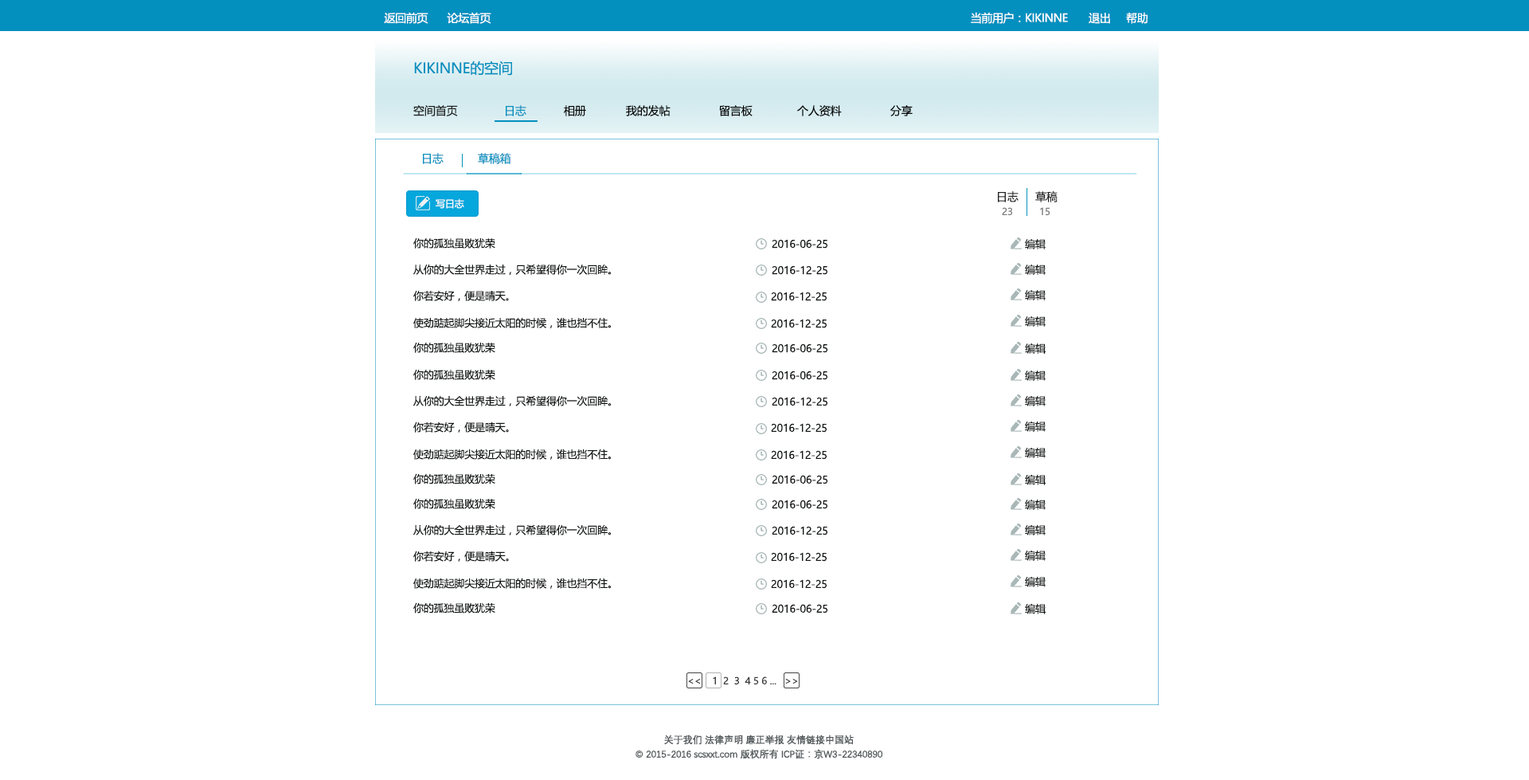
<style>
.page{position:relative;width:1529px;height:780px;background:#ffffff}
.page>*{position:absolute;margin:0}
.t1{font:11.2px "MicrosoftYaHei";letter-spacing:-0.025em;color:#ffffff}
.t2{font:14.3px "MicrosoftYaHei";letter-spacing:-0.01em;color:#0390bf}
.t3{font:11.2px "MicrosoftYaHei";letter-spacing:-0.01em;color:#1f2020}
.t4{font:11.2px "MicrosoftYaHei";letter-spacing:-0.01em;color:#0390bf}
.t5{font:11.2px "MicrosoftYaHei";letter-spacing:-0.01em;color:#040404}
.t6{font:11.2px "MicrosoftYaHei";letter-spacing:-0.01em;color:#242323}
.t7{font:9.6px "MicrosoftYaHei";letter-spacing:-0.01em;color:#ffffff}
.t8{font:9.6px "MicrosoftYaHei";letter-spacing:-0.01em;color:#7b7b7b}
.t9{font:10.4px "MicrosoftYaHei";letter-spacing:-0.01em;color:#131616}
.t10{font:9.6px "MicrosoftYaHei";letter-spacing:-0.01em;color:#38393a}
.t11{font:9.6px "MicrosoftYaHei";letter-spacing:-0.01em;color:#252626}
.t12{font:9.6px/14.3px "DengXian-Regular";letter-spacing:-0.025em;color:#545a5c;font-weight:bold}
</style>
<div class="page">
<p class="t1" style="left:384px;top:12px;width:45px;height:12px">返回前页</p>
<p class="t1" style="left:447px;top:12px;width:44px;height:12px">论坛首页</p>
<p class="t1" style="left:971px;top:12px;width:97px;height:12px">当前用户：KIKINNE</p>
<p class="t1" style="left:1089px;top:13px;width:21px;height:11px">退出</p>
<p class="t1" style="left:1126px;top:12px;width:22px;height:12px">帮助</p>
<p class="t2" style="left:414px;top:61px;width:98px;height:15px">KIKINNE的空间</p>
<p class="t3" style="left:413px;top:105px;width:45px;height:11px">空间首页</p>
<p class="t4" style="left:506px;top:105px;width:20px;height:11px">日志</p>
<p class="t5" style="left:564px;top:105px;width:22px;height:11px">相册</p>
<p class="t5" style="left:626px;top:105px;width:45px;height:11px">我的发帖</p>
<p class="t5" style="left:719px;top:105px;width:34px;height:11px">留言板</p>
<p class="t5" style="left:797px;top:105px;width:45px;height:11px">个人资料</p>
<p class="t5" style="left:890px;top:105px;width:23px;height:11px">分享</p>
<p class="t4" style="left:423px;top:153px;width:21px;height:11px">日志</p>
<p class="t4" style="left:478px;top:153px;width:33px;height:11px">草稿箱</p>
<p class="t6" style="left:998px;top:191px;width:21px;height:11px">日志</p>
<p class="t6" style="left:1035px;top:191px;width:23px;height:11px">草稿</p>
<p class="t7" style="left:436px;top:198px;width:28px;height:11px">写日志</p>
<p class="t8" style="left:1002px;top:207px;width:11px;height:9px">23</p>
<p class="t8" style="left:1040px;top:207px;width:11px;height:9px">15</p>
<p class="t9" style="left:413px;top:238px;width:82px;height:11px">你的孤独虽败犹荣</p>
<p class="t9" style="left:772px;top:239px;width:56px;height:10px">2016-06-25</p>
<p class="t9" style="left:1025px;top:239px;width:21px;height:10px">编辑</p>
<p class="t9" style="left:413px;top:264px;width:199px;height:11px">从你的大全世界走过，只希望得你一次回眸。</p>
<p class="t9" style="left:772px;top:265px;width:56px;height:10px">2016-12-25</p>
<p class="t9" style="left:1025px;top:264px;width:21px;height:11px">编辑</p>
<p class="t9" style="left:413px;top:291px;width:96px;height:10px">你若安好，便是晴天。</p>
<p class="t9" style="left:771px;top:292px;width:57px;height:9px">2016-12-25</p>
<p class="t9" style="left:1025px;top:290px;width:21px;height:10px">编辑</p>
<p class="t9" style="left:413px;top:318px;width:199px;height:10px">使劲踮起脚尖接近太阳的时候，谁也挡不住。</p>
<p class="t9" style="left:1025px;top:316px;width:21px;height:11px">编辑</p>
<p class="t9" style="left:771px;top:319px;width:57px;height:9px">2016-12-25</p>
<p class="t9" style="left:413px;top:342px;width:82px;height:11px">你的孤独虽败犹荣</p>
<p class="t9" style="left:772px;top:343px;width:56px;height:10px">2016-06-25</p>
<p class="t9" style="left:1025px;top:343px;width:21px;height:11px">编辑</p>
<p class="t9" style="left:413px;top:370px;width:82px;height:10px">你的孤独虽败犹荣</p>
<p class="t9" style="left:772px;top:370px;width:56px;height:10px">2016-06-25</p>
<p class="t9" style="left:1025px;top:370px;width:21px;height:11px">编辑</p>
<p class="t9" style="left:413px;top:395px;width:199px;height:11px">从你的大全世界走过，只希望得你一次回眸。</p>
<p class="t9" style="left:772px;top:397px;width:56px;height:9px">2016-12-25</p>
<p class="t9" style="left:1025px;top:396px;width:21px;height:10px">编辑</p>
<p class="t9" style="left:413px;top:421px;width:96px;height:11px">你若安好，便是晴天。</p>
<p class="t9" style="left:771px;top:423px;width:57px;height:9px">2016-12-25</p>
<p class="t9" style="left:1025px;top:421px;width:21px;height:11px">编辑</p>
<p class="t9" style="left:413px;top:448px;width:199px;height:12px">使劲踮起脚尖接近太阳的时候，谁也挡不住。</p>
<p class="t9" style="left:1025px;top:447px;width:21px;height:11px">编辑</p>
<p class="t9" style="left:771px;top:450px;width:57px;height:10px">2016-12-25</p>
<p class="t9" style="left:413px;top:473px;width:82px;height:11px">你的孤独虽败犹荣</p>
<p class="t9" style="left:1025px;top:474px;width:21px;height:11px">编辑</p>
<p class="t9" style="left:772px;top:475px;width:56px;height:9px">2016-06-25</p>
<p class="t9" style="left:413px;top:499px;width:82px;height:10px">你的孤独虽败犹荣</p>
<p class="t9" style="left:772px;top:499px;width:56px;height:10px">2016-06-25</p>
<p class="t9" style="left:1025px;top:499px;width:21px;height:11px">编辑</p>
<p class="t9" style="left:413px;top:524px;width:199px;height:11px">从你的大全世界走过，只希望得你一次回眸。</p>
<p class="t9" style="left:772px;top:526px;width:56px;height:9px">2016-12-25</p>
<p class="t9" style="left:1025px;top:525px;width:21px;height:10px">编辑</p>
<p class="t9" style="left:413px;top:550px;width:96px;height:12px">你若安好，便是晴天。</p>
<p class="t9" style="left:771px;top:552px;width:57px;height:10px">2016-12-25</p>
<p class="t9" style="left:1025px;top:550px;width:21px;height:11px">编辑</p>
<p class="t9" style="left:413px;top:577px;width:199px;height:12px">使劲踮起脚尖接近太阳的时候，谁也挡不住。</p>
<p class="t9" style="left:771px;top:579px;width:57px;height:10px">2016-12-25</p>
<p class="t9" style="left:1025px;top:576px;width:21px;height:11px">编辑</p>
<p class="t9" style="left:413px;top:602px;width:82px;height:11px">你的孤独虽败犹荣</p>
<p class="t9" style="left:772px;top:604px;width:56px;height:9px">2016-06-25</p>
<p class="t9" style="left:1025px;top:603px;width:21px;height:11px">编辑</p>
<p class="t10" style="left:688px;top:676px;width:110px;height:9px">&lt;&lt;    1  2 <span class="t11"> 3</span>  4 5 6 ...   &gt;&gt;</p>
<p class="t12" style="left:636px;top:734px;width:247px;height:25px;text-align:center">关于我们 法律声明 廉正举报 友情链接中国站<br>© 2015-2016 scsxxt.com 版权所有 ICP证：京W3-22340890</p>
</div>
